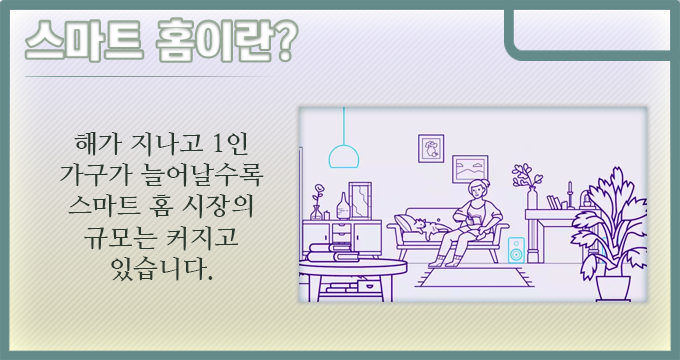
<style>
.page{position:relative;width:680px;height:360px}
.page>*{position:absolute;margin:0}
.t1{font:44px "KoreanTITGD5-R";letter-spacing:-0.01em;color:#ffffff}
.t2{font:26px "NanumMyeongjoBold";letter-spacing:-0.01em;color:#2a382e}
</style>
<div class="page">
<p class="t1" style="left:26px;top:19px;width:271px;height:42px">스마트 홈이란?</p>
<p class="t2" style="left:60px;top:132px;width:204px;height:150px;text-align:center">해가 지나고 1인 가구가 늘어날수록 스마트 홈 시장의 규모는 커지고 있습니다.</p>
</div>
